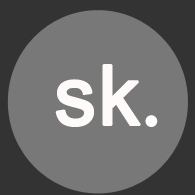
<style>
.page{position:relative;width:195px;height:195px;background:#797878}
.page>*{position:absolute;margin:0}
.t1{font:83.3px "ArialMT";color:#fdfaf9;font-weight:bold}
.t2{font:83.3px "MicrosoftNewTaiLue";color:#ddd9d7;font-weight:bold}
.t3{font:83.3px "MicrosoftNewTaiLue";color:#fefdfc;font-weight:bold}
</style>
<div class="page">
<p class="t1" style="left:55px;top:64px;width:103px;height:63px"><span class="t2">      </span>sk<span class="t3">.</span></p>
</div>
